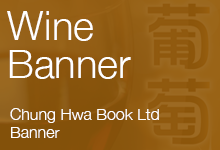
<style>
.page{position:relative;width:220px;height:150px}
.page>*{position:absolute;margin:0}
.t1{font:40px/38px "HelveticaNeue-Light";color:#ffffff}
.t2{font:16px/18px "HelveticaNeue-Light";color:#ffffff}
</style>
<div class="page">
<p class="t1" style="left:7px;top:11px;width:124px;height:68px">Wine<br>Banner</p>
<p class="t2" style="left:10px;top:108px;width:149px;height:30px">Chung Hwa Book Ltd<br>Banner</p>
</div>
